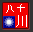
<style>
.page{position:relative;width:33px;height:32px;background:#f20000}
.page>*{position:absolute;margin:0}
.t1{font:10.4px "SimSun";color:#ffffff}
.t2{font:11.7px "SimSun";color:#ffffff}
</style>
<div class="page">
<p class="t1" style="left:6px;top:4px;width:19px;height:9px">八十</p>
<p class="t2" style="left:16px;top:15px;width:11px;height:12px">川</p>
</div>
